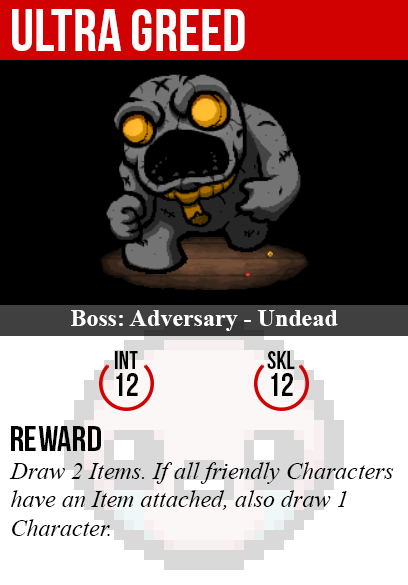
<style>
.page{position:relative;width:408px;height:585px;background:#000000}
.page>*{position:absolute;margin:0}
.t1{font:60px "BebasNeue";color:#ffffff}
.t2{font:24px "TimesNewRomanPS-BoldMT";color:#ffffff}
.t3{font:25px "BebasNeue";color:#000000}
.t4{font:32px "BebasNeue";color:#000000}
.t5{font:36px "BebasNeue";color:#000000}
.t6{font:24px "TimesNewRomanPS-ItalicMT";color:#000000}
</style>
<div class="page">
<p class="t1" style="left:12px;top:9px;width:233px;height:42px">ultra greed</p>
<p class="t2" style="left:71px;top:310px;width:267px;height:21px">Boss: Adversary - Undead</p>
<p class="t3" style="left:115px;top:351px;width:23px;height:18px">int</p>
<p class="t3" style="left:267px;top:351px;width:28px;height:18px">skl</p>
<p class="t4" style="left:116px;top:373px;width:22px;height:23px">12</p>
<p class="t4" style="left:271px;top:373px;width:22px;height:23px">12</p>
<p class="t5" style="left:11px;top:426px;width:90px;height:25px">reward</p>
<p class="t6" style="left:9px;top:462px;width:385px;height:74px">Draw 2 Items. If all friendly Characters<br>have an Item attached, also draw 1<br>Character.</p>
</div>
